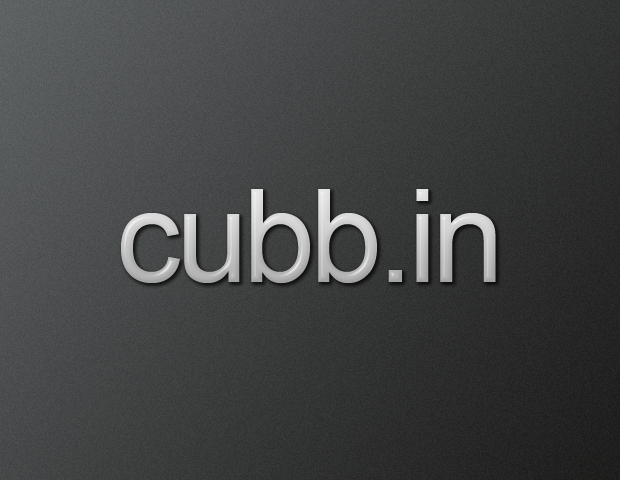
<style>
.page{position:relative;width:620px;height:480px}
.page>*{position:absolute;margin:0}
.t1{font:130px "ArialMT";letter-spacing:-0.04em;color:#c6c6c6}
</style>
<div class="page">
<p class="t1" style="left:121px;top:189px;width:375px;height:95px">cubb.in</p>
</div>
